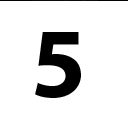
<style>
.page{position:relative;width:128px;height:128px;background:#ffffff}
.page>*{position:absolute;margin:0}
.t1{font:100px "MyriadHebrew-Bold";color:#000000}
</style>
<div class="page">
<p class="t1" style="left:35px;top:31px;width:46px;height:66px">5</p>
</div>
